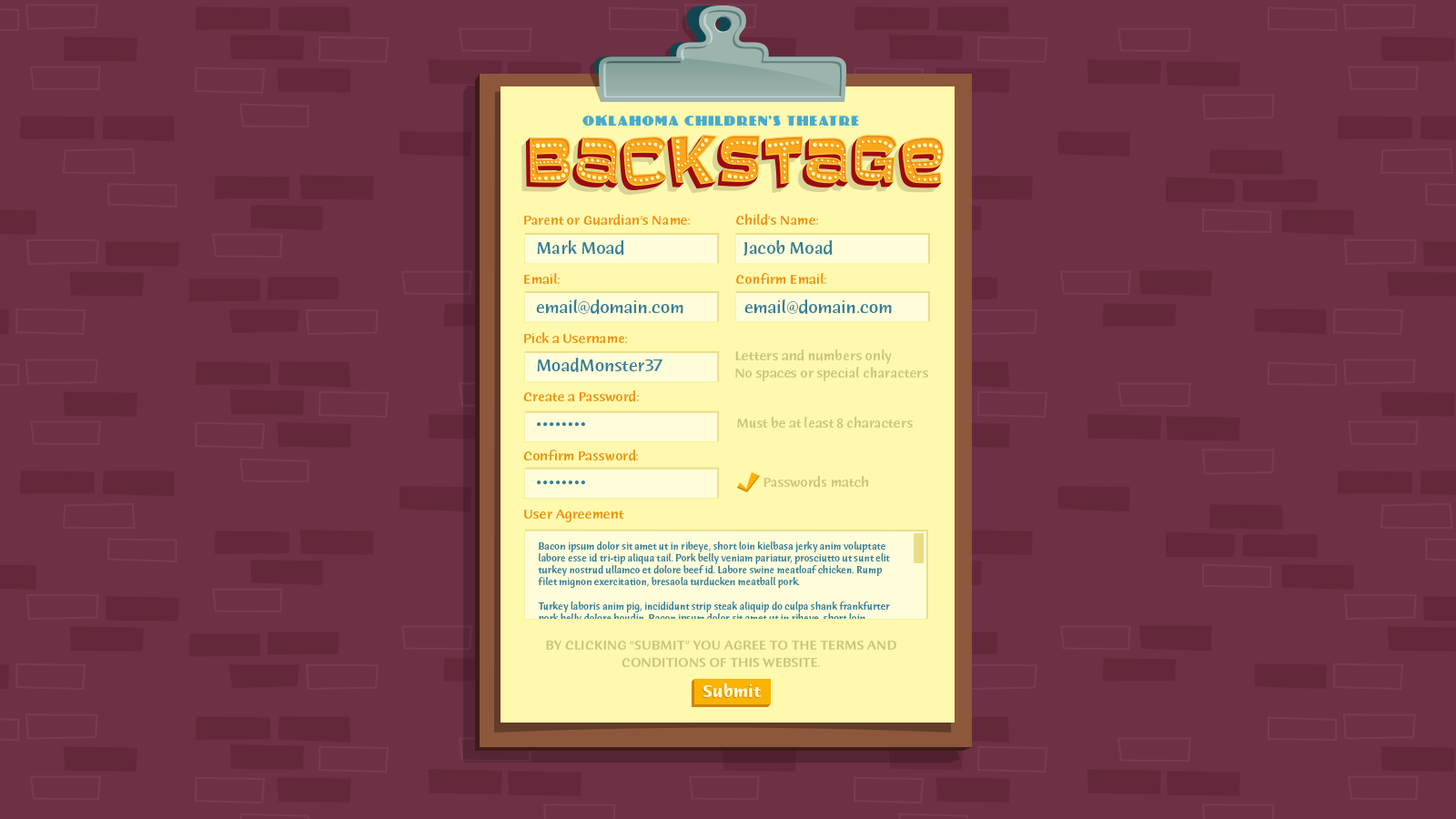
<style>
.page{position:relative;width:1456px;height:819px;background:#6d3044}
.page>*{position:absolute;margin:0}
.t1{font:12.4px "PhattPhreddy";letter-spacing:0.1em;color:#47abcc;text-transform:uppercase}
.t2{font:14.1px "HumanaSansITC-Medium";color:#ed9200}
.t3{font:17.7px "HumanaSansITC-Medium";color:#368099}
.t4{font:14.1px "HumanaSansITC-Medium";color:#c9c579}
.t5{font:10px "HumanaSansITC-Medium";color:#368099}
.t6{font:14.1px "HumanaSansITC-Medium";color:#c9c579;text-transform:uppercase}
.t7{font:17.7px "HumanaSansITC-Bold";color:#fffbc7}
</style>
<div class="page">
<p class="t1" style="left:582px;top:115px;width:277px;height:11px">Oklahoma Children’s Theatre</p>
<p class="t2" style="left:523px;top:214px;width:303px;height:308px">Parent or Guardian’s Name:      Child’s Name:<br>Email:          Confirm Email:<br>Pick a Username:<br>Create a Password:<br>Confirm Password:<br>User Agreement</p>
<p class="t3" style="left:536px;top:240px;width:356px;height:245px">Mark Moad              Jacob Moad<br>email@domain.com     email@domain.com<br>MoadMonster37<br>••••••••<br>••••••••</p>
<p class="t4" style="left:735px;top:349px;width:194px;height:32px">Letters and numbers only<br>No spaces or special characters</p>
<p class="t4" style="left:737px;top:417px;width:176px;height:12px">Must be at least 8 characters</p>
<p class="t4" style="left:763px;top:476px;width:106px;height:12px">Passwords match</p>
<p class="t5" style="left:538px;top:541px;width:352px;height:107px">Bacon ipsum dolor sit amet ut in ribeye, short loin kielbasa jerky anim voluptate labore esse id tri-tip aliqua tail. Pork belly veniam pariatur, prosciutto ut sunt elit turkey nostrud ullamco et dolore beef id. Labore swine meatloaf chicken. Rump filet mignon exercitation, bresaola turducken meatball pork.<br><br>Turkey laboris anim pig, incididunt strip steak aliquip do culpa shank frankfurter pork belly dolore boudin. Bacon ipsum dolor sit amet ut in ribeye, short loin kielbasa jerky anim voluptate labore esse id tri-tip aliqua tail. Pork belly veniam pariatur, prosciutto ut sunt elit turkey nostrud ullamco et dolore beef id. Labore swine meatloaf chicken. Rump filet mignon exercitation, bresaola turducken meatball pork. Turkey laboris anim pig, incididunt strip steak aliquip do culpa shank frankfurter pork belly dolore boudin.</p>
<p class="t6" style="left:546px;top:640px;width:350px;height:27px;text-align:center">By clicking “submit” you agree to the terms and conditions of this website.</p>
<p class="t7" style="left:703px;top:683px;width:59px;height:15px">Submit</p>
</div>
